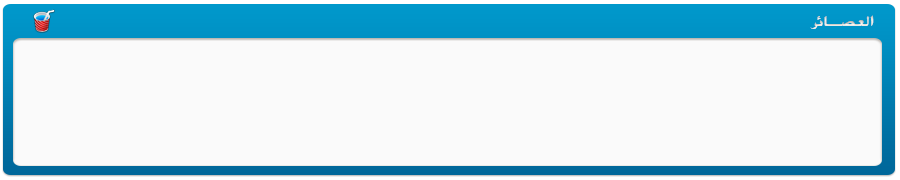
<style>
.page{position:relative;width:900px;height:180px;background:#fafafa}
.page>*{position:absolute;margin:0}
.t1{font:16px "BoutrosAdsMedium";color:#eaeae7}
</style>
<div class="page">
<p class="t1" style="left:810px;top:15px;width:64px;height:14px">العصـائر</p>
</div>
